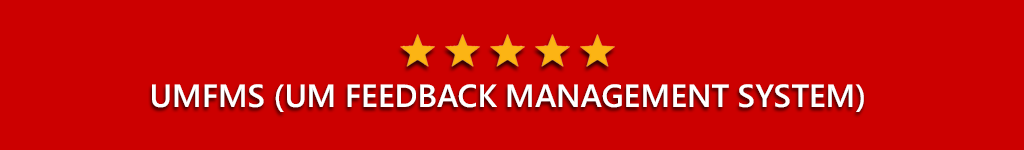
<style>
.page{position:relative;width:1024px;height:150px;background:#cc0000}
.page>*{position:absolute;margin:0}
.t1{font:32px "SegoeUI-Semibold";color:#ffffff}
</style>
<div class="page">
<p class="t1" style="left:152px;top:84px;width:712px;height:28px">UMFMS (UM FEEDBACK MANAGEMENT SYSTEM)</p>
</div>
